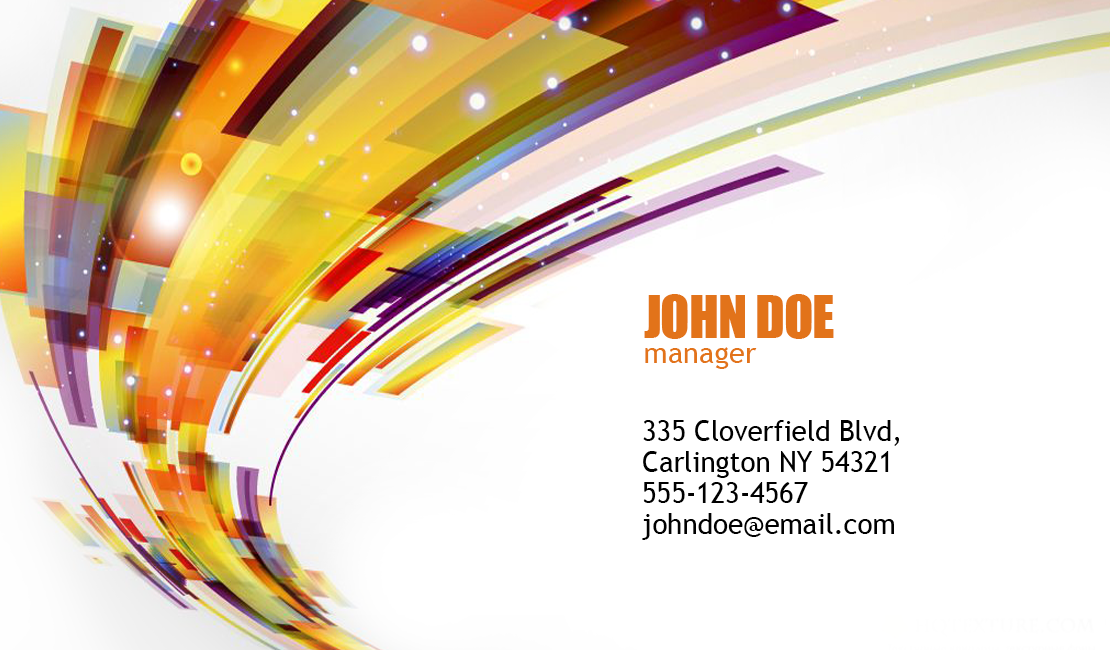
<style>
.page{position:relative;width:1110px;height:650px;background:#ffffff}
.page>*{position:absolute;margin:0}
.t1{font:54.2px "Impact";letter-spacing:-0.02em;color:#e2731a}
.t2{font:29.2px "TrebuchetMS";color:#e2731a}
.t3{font:29.2px/31.3px "TrebuchetMS";color:#000000;scale:0.95 1}
</style>
<div class="page">
<p class="t1" style="left:644px;top:294px;width:190px;height:45px">JOHN DOE</p>
<p class="t2" style="left:645px;top:347px;width:112px;height:22px">manager</p>
<p class="t3" style="left:643px;top:420px;width:256px;height:58px">335 Cloverfield Blvd,<br>Carlington NY 54321</p>
<p class="t3" style="left:642px;top:482px;width:252px;height:58px">555-123-4567<br>johndoe@email.com</p>
</div>
